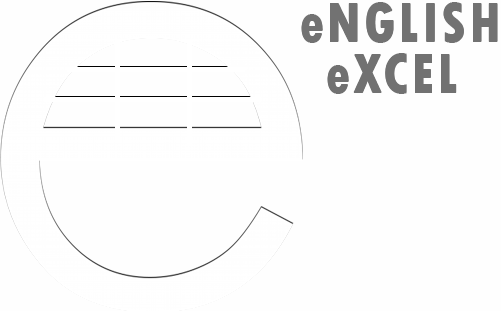
<style>
.page{position:relative;width:501px;height:311px;background:#fefefe}
.page>*{position:absolute;margin:0}
.t1{font:57.8px "TwCenMT-CondensedExtraBold";letter-spacing:0.04em;color:#737373}
.t2{font:57.8px "TwCenMT-CondensedExtraBold";letter-spacing:0.04em;color:#717171}
</style>
<div class="page">
<p class="t1" style="left:301px;top:2px;width:197px;height:40px">eNGLISH</p>
<p class="t1" style="left:301px;top:3px;width:197px;height:40px">eNGLISH</p>
<p class="t2" style="left:327px;top:53px;width:130px;height:40px">eXCEL</p>
<p class="t2" style="left:327px;top:54px;width:130px;height:40px">eXCEL</p>
</div>
